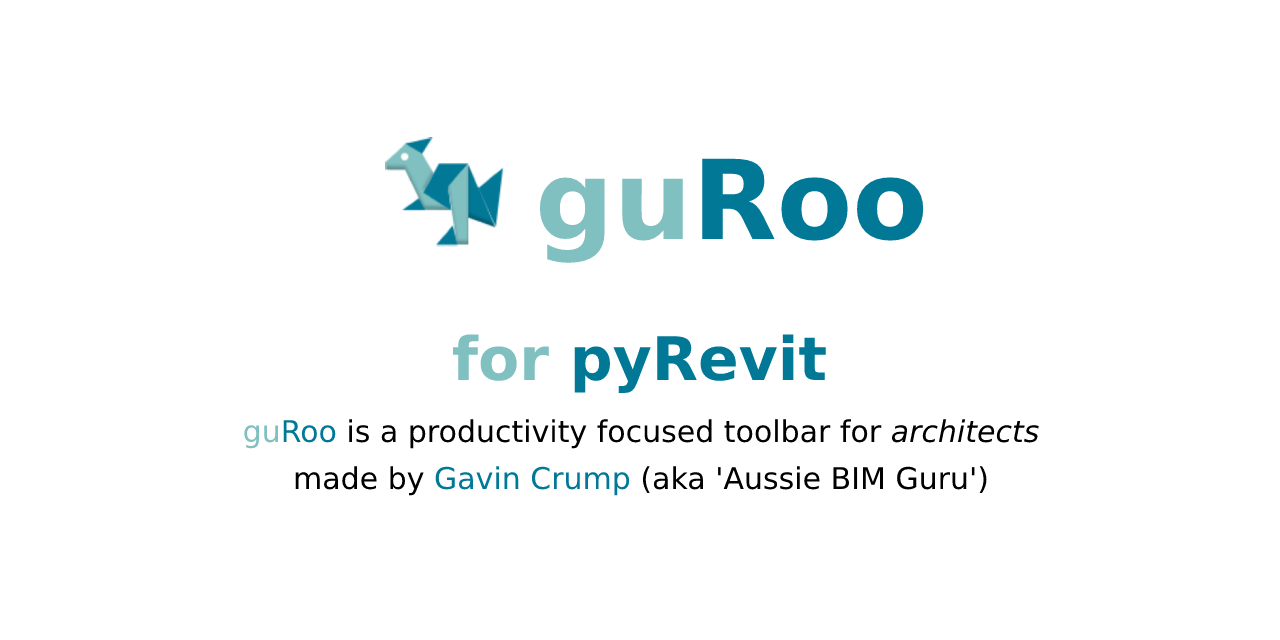
<style>
.page{position:relative;width:1280px;height:640px;background:#ffffff}
.page>*{position:absolute;margin:0}
.t1{font:110px "DejaVuSans-Bold";color:#007896}
.t2{font:110px "DejaVuSans-Bold";color:#80c0c0}
.t3{font:60px "DejaVuSans-Bold";color:#007896}
.t4{font:60px "DejaVuSans-Bold";color:#80c0c0}
.t5{font:30px "DejaVuSans";color:#000000}
.t6{font:30px "DejaVuSans";color:#80c0c0}
.t7{font:30px "DejaVuSans";color:#007896}
.t8{font:30px "DejaVuSans-Oblique";color:#000000}
</style>
<div class="page">
<p class="t1" style="left:539px;top:158px;width:385px;height:105px"><span class="t2">gu</span>Roo</p>
<p class="t3" style="left:453px;top:334px;width:373px;height:59px"><span class="t4">for </span>pyRevit</p>
<p class="t5" style="left:244px;top:419px;width:795px;height:30px"><span class="t6">gu</span><span class="t7">Roo </span>is a productivity focused toolbar for <span class="t8">architects</span></p>
<p class="t5" style="left:295px;top:466px;width:692px;height:30px">made by <span class="t7">Gavin Crump </span>(aka 'Aussie BIM Guru')</p>
</div>
